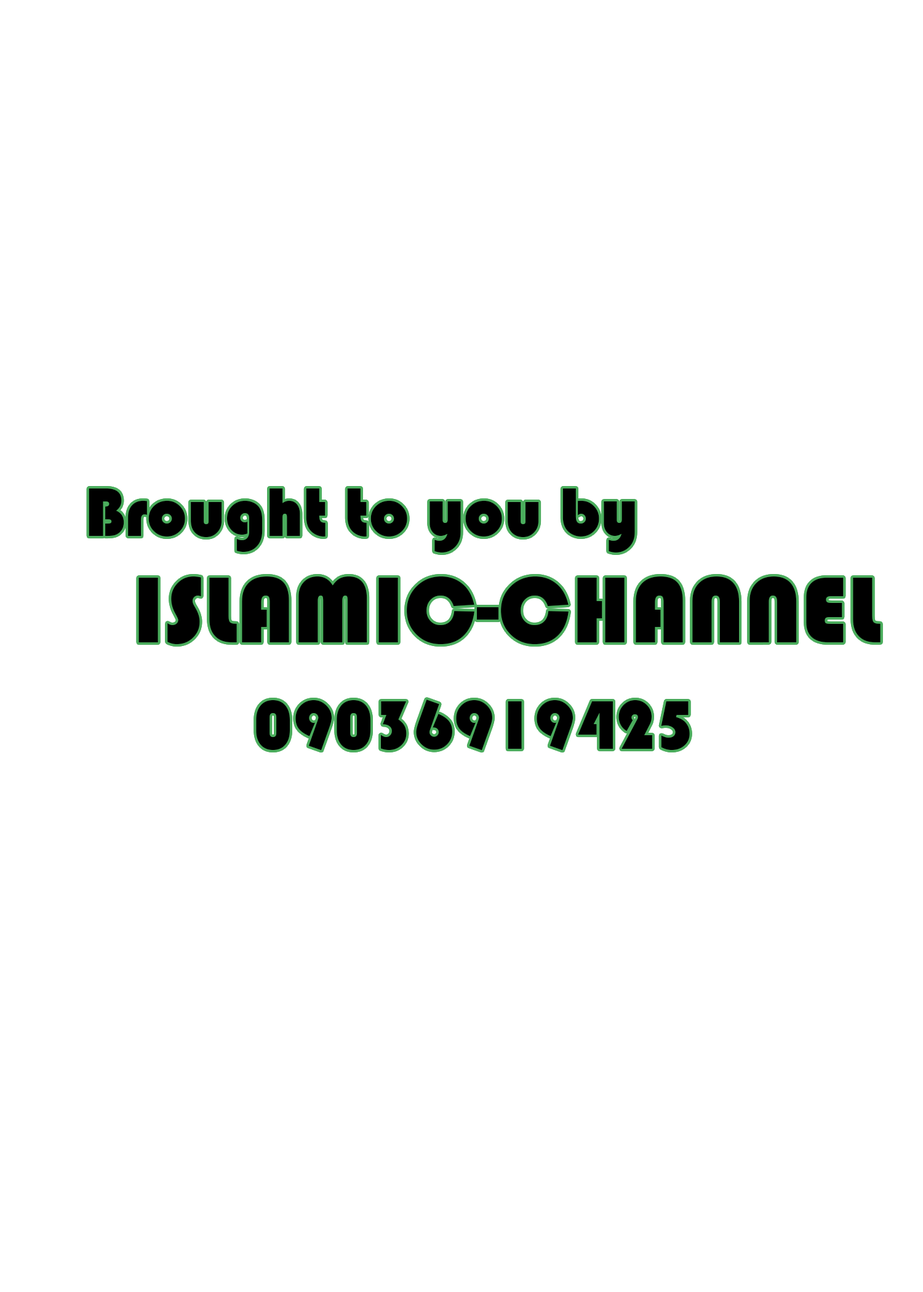
<style>
.page{position:relative;width:923px;height:1292px;background:#ffffff}
.page>*{position:absolute;margin:0}
.t1{font:70.8px/106.7px "Bauhaus93";color:#000000}
.t2{font:96.5px/106.7px "Bauhaus93";color:#000000}
</style>
<div class="page">
<p class="t1" style="left:89px;top:489px;width:791px;height:262px">Brought to you by <br><span class="t2">  ISLAMIC-CHANNEL<br>       </span>09036919425</p>
</div>
